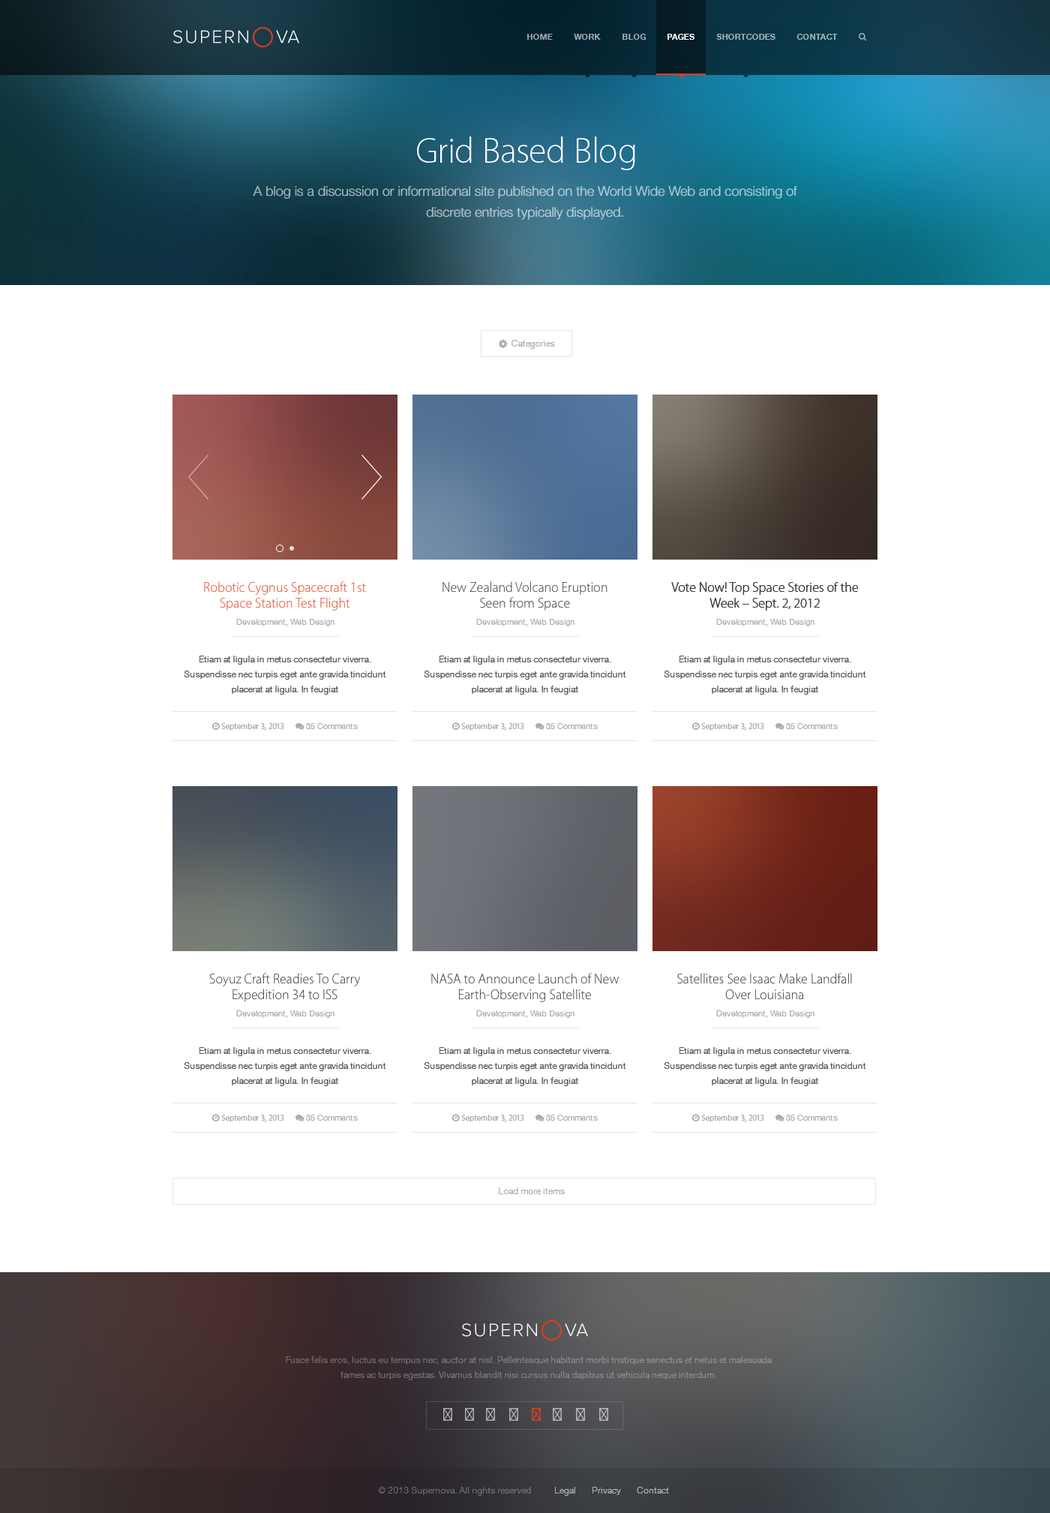
<style>
.page{position:relative;width:1050px;height:1513px;background:#ffffff}
.page>*{position:absolute;margin:0}
.t1{font:8.2px "HelveticaNeue-Bold";color:#9aa6ab;text-transform:uppercase}
.t2{font:8.2px "HelveticaNeue-Bold";color:#9ba7ac;text-transform:uppercase}
.t3{font:8.2px "HelveticaNeue-Bold";color:#9ba9af;text-transform:uppercase}
.t4{font:8.2px "HelveticaNeue-Bold";color:#ffffff;text-transform:uppercase}
.t5{font:8.2px "HelveticaNeue-Bold";color:#9caeb5;text-transform:uppercase}
.t6{font:8.2px "HelveticaNeue-Bold";color:#9dafb6;text-transform:uppercase}
.t7{font:36px "MyriadPro-Light";color:#ffffff}
.t8{font:13.5px/21px "HelveticaNeue-Light";color:#a9c5ce}
.t9{font:9px "HelveticaNeue";color:#adadad}
.t10{font:13.5px/15.7px "MyriadPro-Light";color:#dd3f19}
.t11{font:13.5px/15.7px "MyriadPro-Light";color:#333333}
.t12{font:8.2px "HelveticaNeue";color:#adadad}
.t13{font:9px/15px "HelveticaNeue";color:#555555}
.t14{font:9px/15px "HelveticaNeue";color:#828286}
.t15{font:9px "HelveticaNeue";color:#6c696e}
.t16{font:9px "HelveticaNeue";color:#b1b1b3}
</style>
<div class="page">
<p class="t1" style="left:527px;top:34px;width:26px;height:6px">Home</p>
<p class="t2" style="left:574px;top:34px;width:27px;height:6px">Work</p>
<p class="t3" style="left:622px;top:34px;width:24px;height:6px">Blog</p>
<p class="t4" style="left:668px;top:34px;width:26px;height:6px">Pages</p>
<p class="t5" style="left:716px;top:34px;width:60px;height:6px">Shortcodes</p>
<p class="t6" style="left:796px;top:34px;width:42px;height:6px">Contact</p>
<p class="t7" style="left:417px;top:136px;width:218px;height:34px">Grid Based Blog</p>
<p class="t8" style="left:253px;top:186px;width:544px;height:34px;text-align:center">A blog is a discussion or informational site published on the World Wide Web and consisting of discrete entries typically displayed.</p>
<p class="t9" style="left:512px;top:340px;width:43px;height:9px">Categories</p>
<p class="t10" style="left:204px;top:581px;width:162px;height:29px;text-align:center">Robotic Cygnus Spacecraft 1st Space Station Test Flight</p>
<p class="t11" style="left:442px;top:581px;width:166px;height:29px;text-align:center">New Zealand Volcano Eruption Seen from Space</p>
<p class="t11" style="left:671px;top:582px;width:188px;height:28px;text-align:center">Vote Now! Top Space Stories of the Week – Sept. 2, 2012</p>
<p class="t12" style="left:236px;top:619px;width:98px;height:7px">Development, Web Design</p>
<p class="t12" style="left:476px;top:619px;width:98px;height:7px">Development, Web Design</p>
<p class="t12" style="left:716px;top:619px;width:98px;height:7px">Development, Web Design</p>
<p class="t13" style="left:184px;top:656px;width:202px;height:38px;text-align:center">Etiam at ligula in metus consectetur viverra. Suspendisse nec turpis eget ante gravida tincidunt placerat at ligula. In feugiat</p>
<p class="t13" style="left:424px;top:656px;width:202px;height:38px;text-align:center">Etiam at ligula in metus consectetur viverra. Suspendisse nec turpis eget ante gravida tincidunt placerat at ligula. In feugiat</p>
<p class="t13" style="left:664px;top:656px;width:202px;height:38px;text-align:center">Etiam at ligula in metus consectetur viverra. Suspendisse nec turpis eget ante gravida tincidunt placerat at ligula. In feugiat</p>
<p class="t11" style="left:209px;top:973px;width:152px;height:29px;text-align:center">Soyuz Craft Readies To Carry Expedition 34 to ISS</p>
<p class="t11" style="left:431px;top:973px;width:189px;height:29px;text-align:center">NASA to Announce Launch of New Earth-Observing Satellite</p>
<p class="t11" style="left:677px;top:973px;width:175px;height:27px;text-align:center">Satellites See Isaac Make Landfall Over Louisiana</p>
<p class="t12" style="left:236px;top:1010px;width:98px;height:8px">Development, Web Design</p>
<p class="t12" style="left:476px;top:1010px;width:98px;height:8px">Development, Web Design</p>
<p class="t12" style="left:716px;top:1010px;width:98px;height:8px">Development, Web Design</p>
<p class="t13" style="left:184px;top:1047px;width:202px;height:39px;text-align:center">Etiam at ligula in metus consectetur viverra. Suspendisse nec turpis eget ante gravida tincidunt placerat at ligula. In feugiat</p>
<p class="t13" style="left:424px;top:1047px;width:202px;height:39px;text-align:center">Etiam at ligula in metus consectetur viverra. Suspendisse nec turpis eget ante gravida tincidunt placerat at ligula. In feugiat</p>
<p class="t13" style="left:664px;top:1047px;width:202px;height:39px;text-align:center">Etiam at ligula in metus consectetur viverra. Suspendisse nec turpis eget ante gravida tincidunt placerat at ligula. In feugiat</p>
<p class="t9" style="left:499px;top:1187px;width:66px;height:7px">Load more items</p>
<p class="t14" style="left:286px;top:1356px;width:486px;height:24px;text-align:center">Fusce felis eros, luctus eu tempus nec, auctor at nisl. Pellentesque habitant morbi tristique senectus et netus et malesuada fames ac turpis egestas. Vivamus blandit nisi cursus nulla dapibus ut vehicula neque interdum.</p>
<p class="t15" style="left:378px;top:1486px;width:153px;height:10px">© 2013 Supernova. All rights reserved</p>
<p class="t16" style="left:555px;top:1486px;width:114px;height:10px">Legal       Privacy       Contact</p>
</div>
